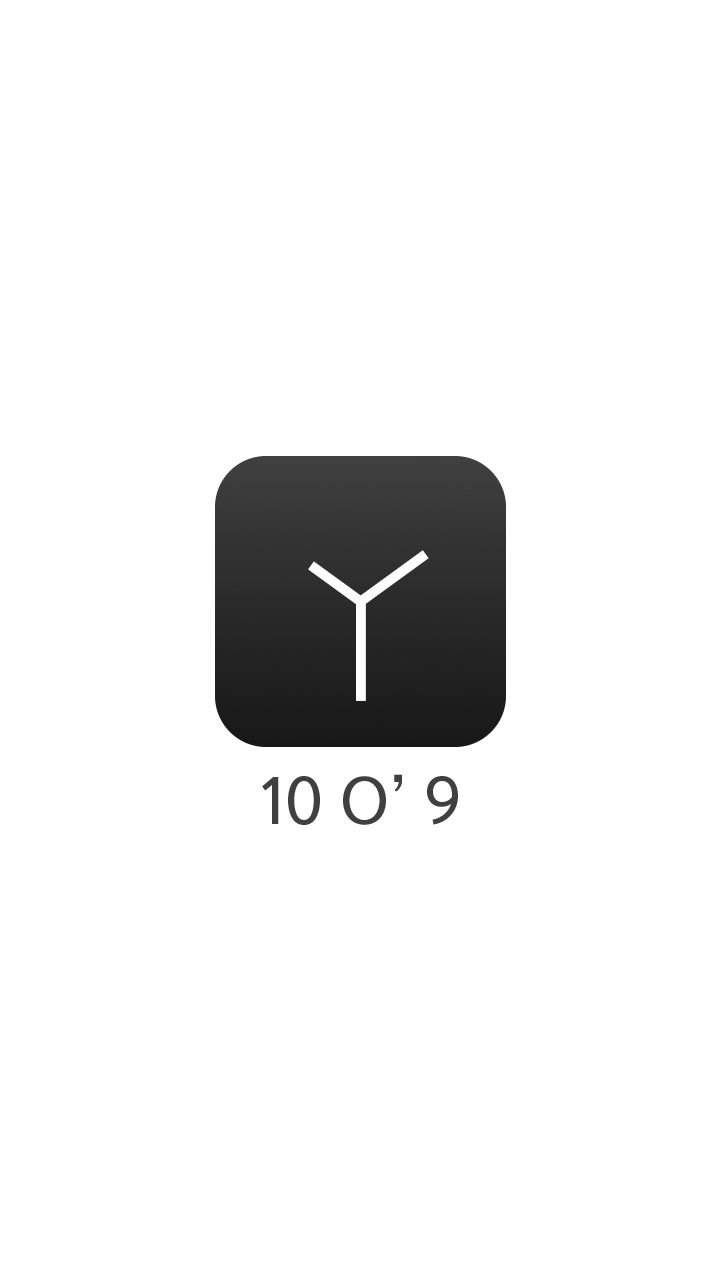
<style>
.page{position:relative;width:720px;height:1280px;background:#ffffff}
.page>*{position:absolute;margin:0}
.t1{font:60px "YoonGothicPro760";color:#404040}
</style>
<div class="page">
<p class="t1" style="left:262px;top:774px;width:196px;height:51px">10 O’ 9</p>
</div>
